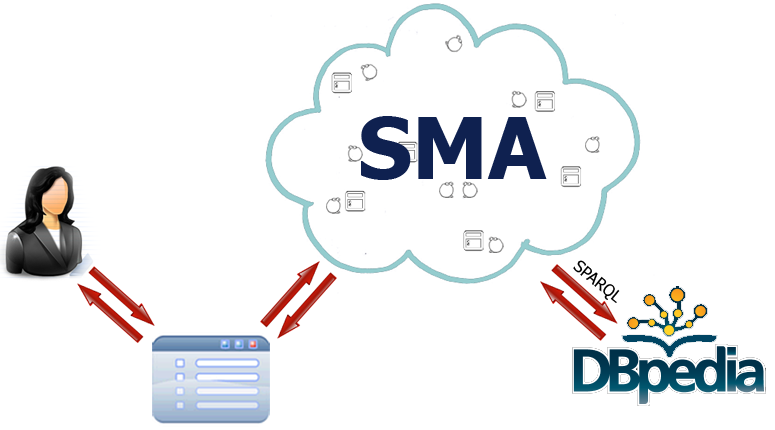
<style>
.page{position:relative;width:775px;height:430px;background:#ffffff}
.page>*{position:absolute;margin:0}
.t1{font:85.1px "Tahoma-Bold";color:#0f2150}
.t2{font:16px "Tahoma";color:#000000}
</style>
<div class="page">
<p class="t1" style="left:361px;top:116px;width:186px;height:64px">SMA</p>
<p class="t2" style="left:573px;top:260px;width:47px;height:43px;rotate:39deg">SPARQL</p>
</div>
